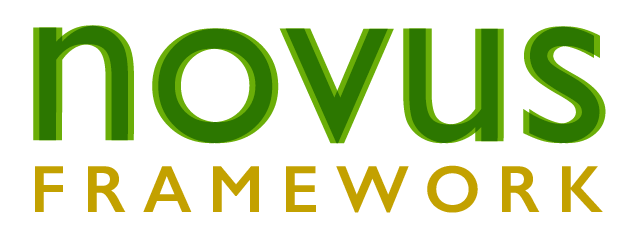
<style>
.page{position:relative;width:631px;height:248px;background:#ffffff}
.page>*{position:absolute;margin:0}
.t1{font:250px "GillSans";color:#2c7700}
.t2{font:66.9px "GillSans-SemiBold";letter-spacing:0.25em;color:#c3a100;text-transform:uppercase}
</style>
<div class="page">
<p class="t1" style="left:33px;top:25px;width:567px;height:119px">novus</p>
<p class="t1" style="left:39px;top:25px;width:567px;height:119px">novus</p>
<p class="t2" style="left:35px;top:165px;width:568px;height:48px">framework</p>
</div>
